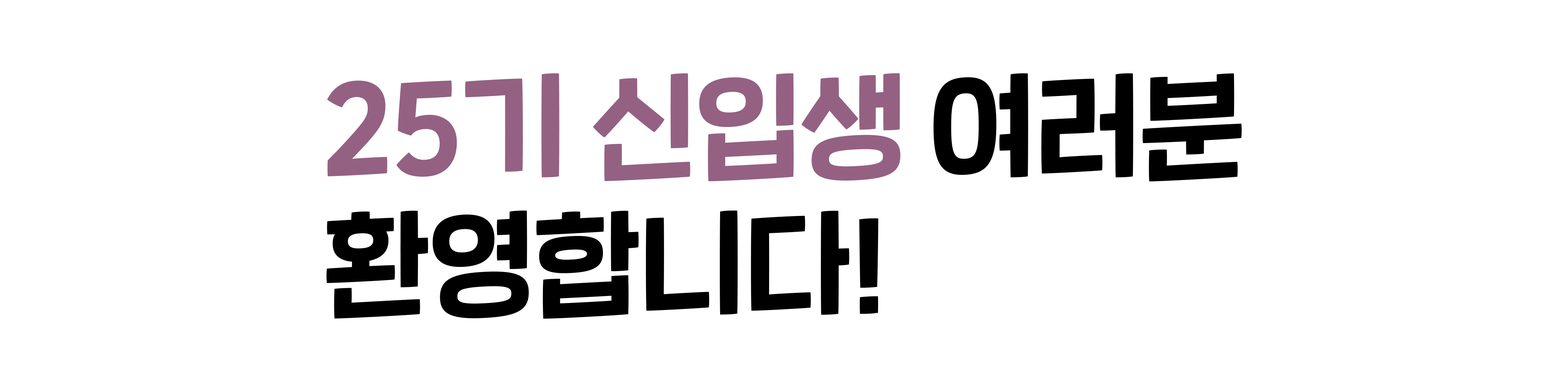
<style>
.page{position:relative;width:1568px;height:392px;background:#ffffff}
.page>*{position:absolute;margin:0}
.t1{font:114.3px "SDNemony-bOblique";color:#000000}
.t2{font:114.3px "SDNemony-bOblique";color:#946182}
</style>
<div class="page">
<p class="t1" style="left:326px;top:73px;width:916px;height:246px"><span class="t2">25기 신입생</span> 여러분<br>환영합니다!</p>
</div>
